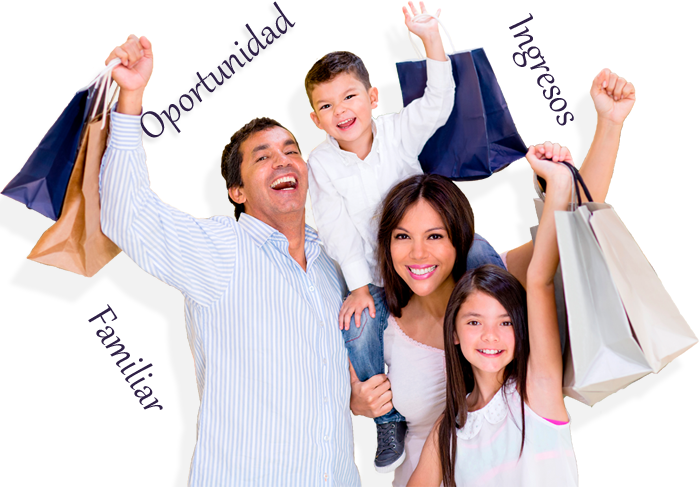
<style>
.page{position:relative;width:699px;height:487px;background:#ffffff}
.page>*{position:absolute;margin:0}
.t1{font:45.8px "Gabriola";color:#2f2047}
.t2{font:45.8px "Gabriola";color:#2f2046}
</style>
<div class="page">
<p class="t1" style="left:140px;top:1px;width:156px;height:137px;rotate:-39deg">Oportunidad</p>
<p class="t2" style="left:509px;top:13px;width:65px;height:113px;rotate:63deg">Ingresos</p>
<p class="t2" style="left:88px;top:304px;width:75px;height:106px;rotate:58deg">Familiar</p>
</div>
